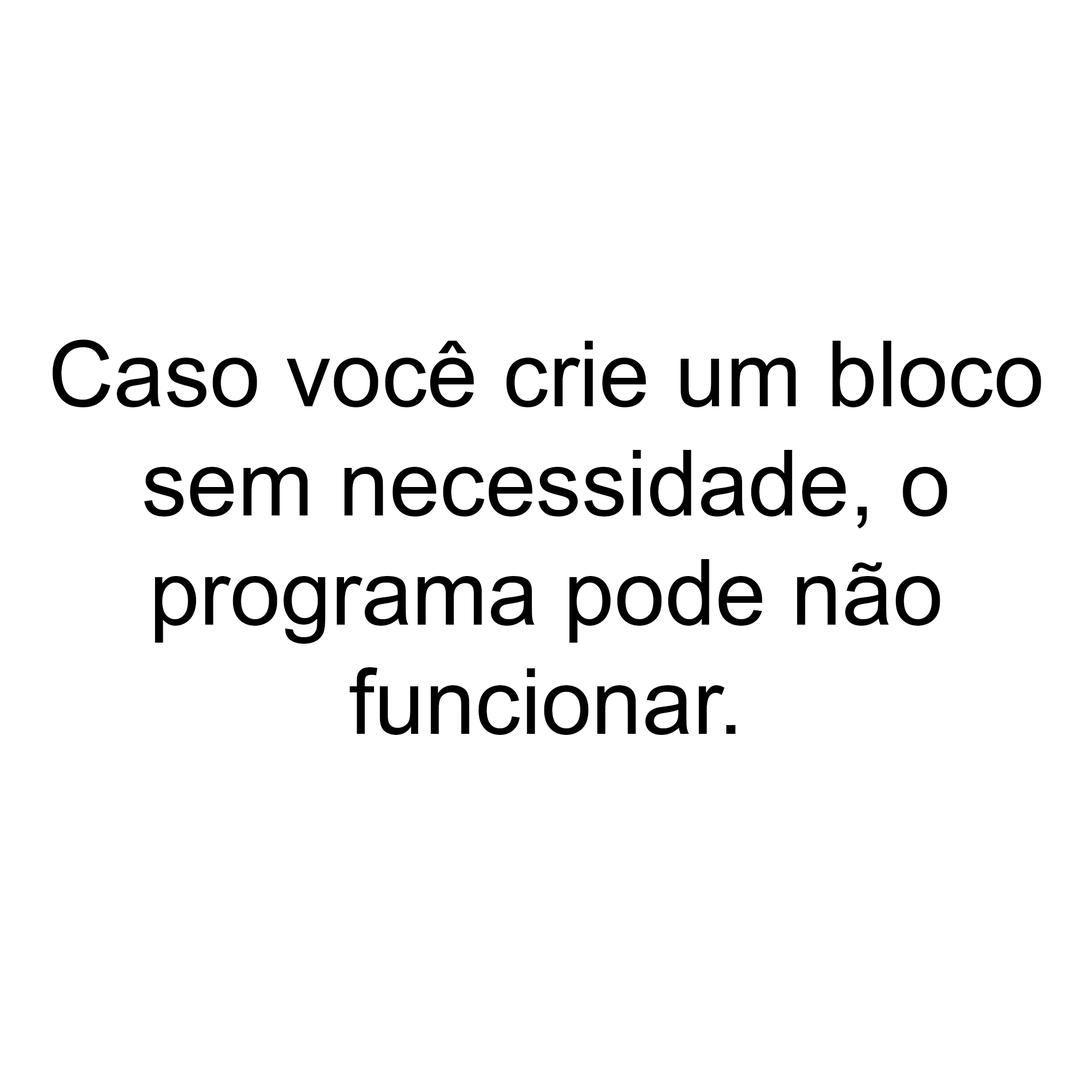
<style>
.page{position:relative;width:1092px;height:1092px;background:#ffffff}
.page>*{position:absolute;margin:0}
.t1{font:91px "ArialMT";color:#000000}
</style>
<div class="page">
<p class="t1" style="left:52px;top:340px;width:989px;height:395px;text-align:center">Caso você crie um bloco<br>sem necessidade, o<br>programa pode não<br>funcionar.</p>
</div>
